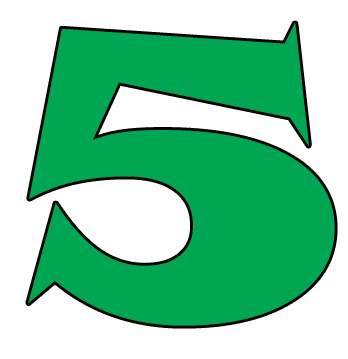
<style>
.page{position:relative;width:348px;height:359px;background:#ffffff}
.page>*{position:absolute;margin:0}
.t1{font:400px "SnapITC-Regular";color:#00a651}
</style>
<div class="page">
<p class="t1" style="left:28px;top:23px;width:307px;height:303px">5</p>
</div>
